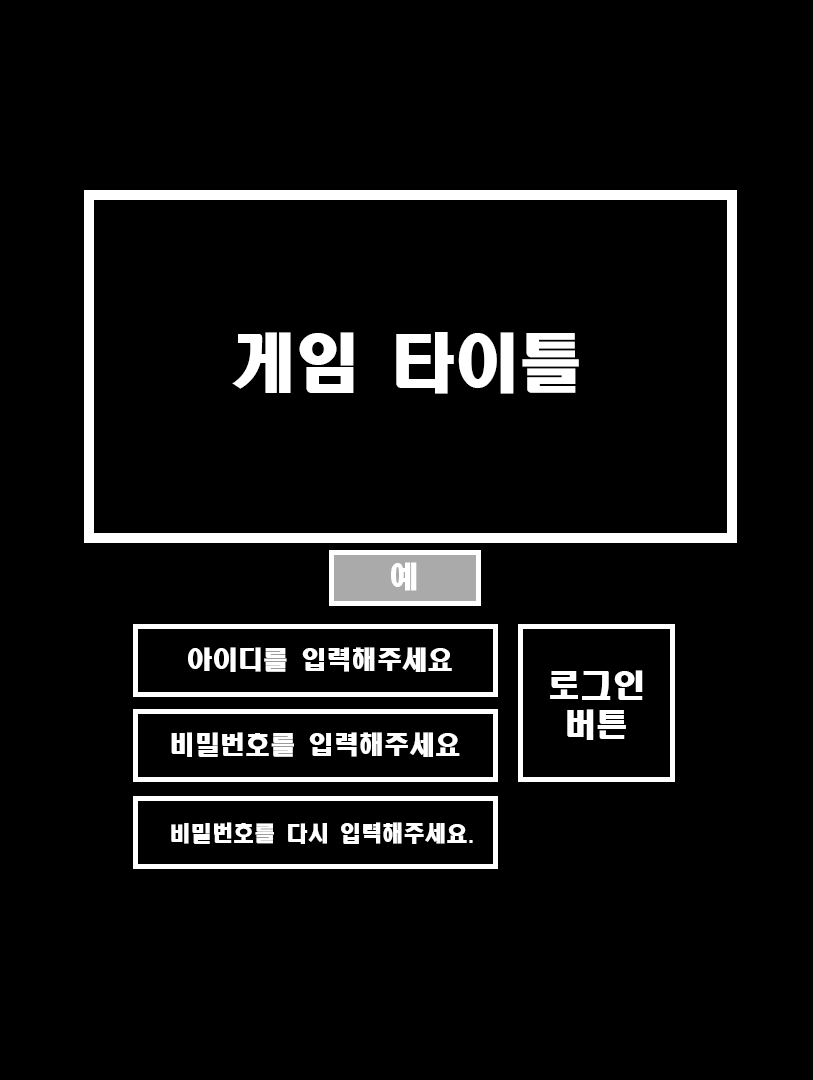
<style>
.page{position:relative;width:813px;height:1080px;background:#000000}
.page>*{position:absolute;margin:0}
.t1{font:64px "HeadlineR-HM";color:#ffffff}
.t2{font:29.3px "HeadlineR-HM";color:#ffffff}
.t3{font:25.4px "HeadlineR-HM";color:#ffffff}
.t4{font:32px "HeadlineR-HM";color:#ffffff}
.t5{font:21.4px "HeadlineR-HM";color:#ffffff}
</style>
<div class="page">
<p class="t1" style="left:232px;top:332px;width:347px;height:62px">게임 타이틀</p>
<p class="t2" style="left:391px;top:562px;width:26px;height:29px">예</p>
<p class="t3" style="left:188px;top:647px;width:264px;height:25px">아이디를 입력해주세요</p>
<p class="t4" style="left:550px;top:670px;width:93px;height:70px;text-align:center">로그인<br>버튼</p>
<p class="t3" style="left:171px;top:732px;width:289px;height:25px">비밀번호를 입력해주세요</p>
<p class="t5" style="left:171px;top:822px;width:302px;height:22px">비밀번호를 다시 입력해주세요.</p>
</div>
